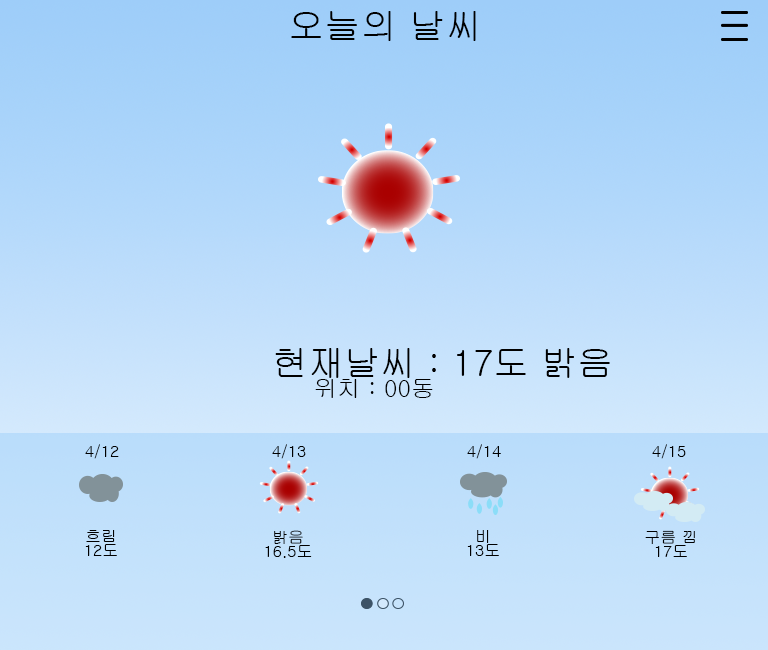
<style>
.page{position:relative;width:768px;height:650px}
.page>*{position:absolute;margin:0}
.t1{font:36px "Gulim";color:#000000}
.t2{font:24px "Gulim";color:#000000}
.t3{font:16px "Gulim";color:#000000}
.t4{font:16px/13.9px "Gulim";color:#000000}
</style>
<div class="page">
<p class="t1" style="left:291px;top:11px;width:185px;height:30px">오늘의 날씨</p>
<p class="t1" style="left:275px;top:348px;width:335px;height:30px">현재날씨 : 17도 밝음</p>
<p class="t2" style="left:315px;top:379px;width:118px;height:19px">위치 : 00동</p>
<p class="t3" style="left:85px;top:444px;width:34px;height:15px">4/12</p>
<p class="t3" style="left:272px;top:444px;width:34px;height:15px">4/13</p>
<p class="t3" style="left:467px;top:444px;width:34px;height:15px">4/14</p>
<p class="t3" style="left:652px;top:444px;width:34px;height:15px">4/15</p>
<p class="t4" style="left:85px;top:530px;width:32px;height:26px;text-align:center">흐림<br>12도</p>
<p class="t4" style="left:265px;top:530px;width:47px;height:28px;text-align:center">밝음<br>16.5도</p>
<p class="t4" style="left:467px;top:530px;width:32px;height:26px;text-align:center">비<br>13도</p>
<p class="t4" style="left:645px;top:530px;width:50px;height:27px;text-align:center">구름 낌<br>17도</p>
</div>
